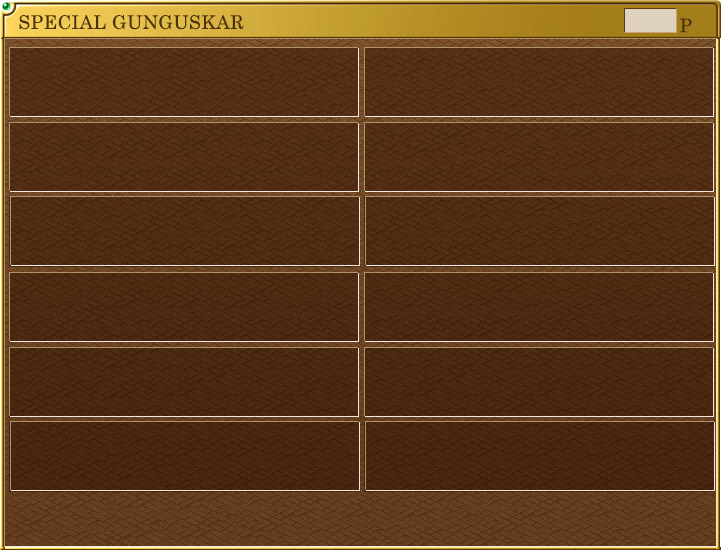
<style>
.page{position:relative;width:724px;height:550px}
.page>*{position:absolute;margin:0}
.t1{font:18.7px "CenturySchoolbook";letter-spacing:0.025em;color:#4b320e}
</style>
<div class="page">
<p class="t1" style="left:19px;top:15px;width:225px;height:15px">SPECIAL GUNGUSKAR</p>
<p class="t1" style="left:680px;top:18px;width:12px;height:15px">P</p>
</div>
